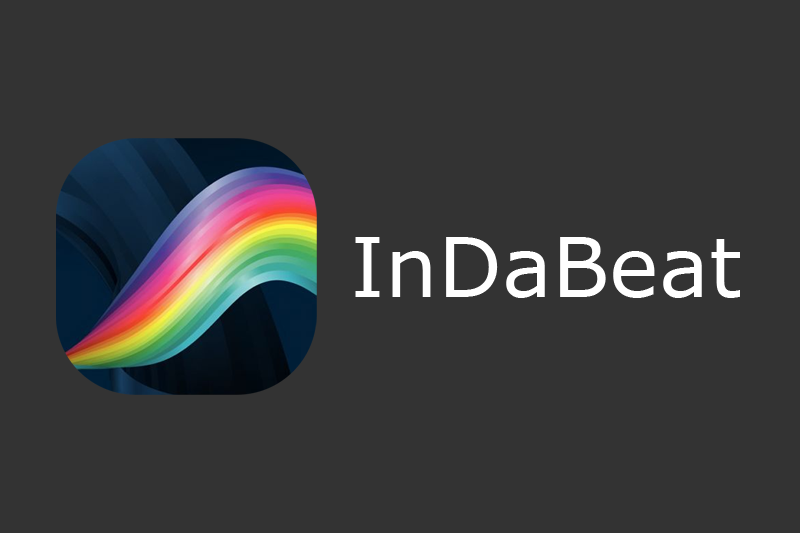
<style>
.page{position:relative;width:800px;height:533px;background:#333333}
.page>*{position:absolute;margin:0}
.t1{font:83.3px "Verdana";color:#ffffff}
</style>
<div class="page">
<p class="t1" style="left:355px;top:237px;width:385px;height:61px">InDaBeat</p>
</div>
